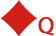
<style>
.page{position:relative;width:56px;height:36px;background:#ffffff}
.page>*{position:absolute;margin:0}
.t1{font:23.4px "MyriadPro-Regular";letter-spacing:-0.1em;color:#d22018;font-weight:bold}
</style>
<div class="page">
<p class="t1" style="left:38px;top:17px;width:16px;height:19px">Q</p>
</div>
